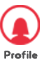
<style>
.page{position:relative;width:40px;height:67px;background:#ffffff}
.page>*{position:absolute;margin:0}
.t1{font:11.3px "Odin-Bold";color:#515152;scale:1.18 1}
</style>
<div class="page">
<p class="t1" style="left:4px;top:50px;width:34px;height:9px">Profile</p>
</div>
